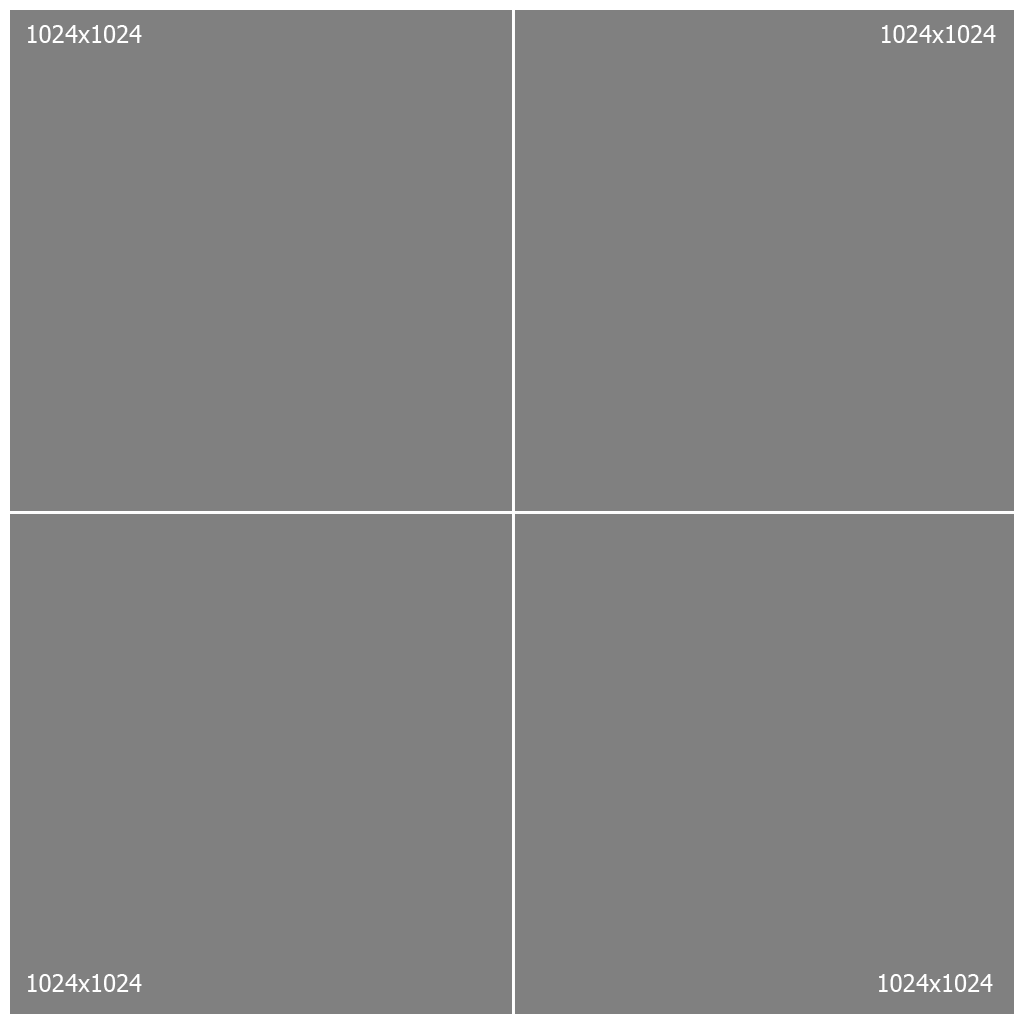
<style>
.page{position:relative;width:1024px;height:1024px;background:#808080}
.page>*{position:absolute;margin:0}
.t1{font:24px "Tahoma";color:#ffffff}
</style>
<div class="page">
<p class="t1" style="left:28px;top:25px;width:114px;height:18px">1024x1024</p>
<p class="t1" style="left:882px;top:25px;width:114px;height:18px">1024x1024</p>
<p class="t1" style="left:28px;top:974px;width:114px;height:18px">1024x1024</p>
<p class="t1" style="left:879px;top:974px;width:114px;height:18px">1024x1024</p>
</div>
